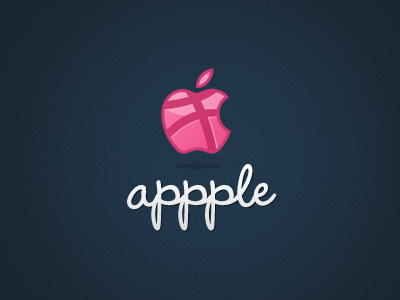
<style>
.page{position:relative;width:400px;height:300px}
.page>*{position:absolute;margin:0}
.t1{font:81.8px "WendyLPStd-Bold";color:#ececec}
</style>
<div class="page">
<p class="t1" style="left:127px;top:164px;width:150px;height:67px">appple</p>
</div>
